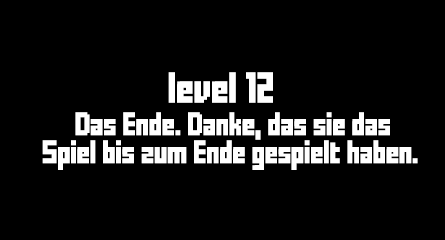
<style>
.page{position:relative;width:445px;height:240px;background:#000000}
.page>*{position:absolute;margin:0}
.t1{font:24px "FFFForward";letter-spacing:-0.025em;color:#ffffff}
.t2{font:18px "FFFForward";letter-spacing:-0.025em;color:#ffffff}
</style>
<div class="page">
<p class="t1" style="left:168px;top:72px;width:105px;height:31px">level 12</p>
<p class="t2" style="left:75px;top:112px;width:315px;height:28px">Das Ende. Danke, das sie das</p>
<p class="t2" style="left:42px;top:140px;width:376px;height:30px">Spiel bis zum Ende gespielt haben.</p>
</div>
